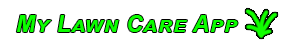
<style>
.page{position:relative;width:302px;height:45px;background:#ffffff}
.page>*{position:absolute;margin:0}
.t1{font:23.4px "Arial-BoldItalicMT";letter-spacing:0.02em;color:#0cff00;font-variant:small-caps}
</style>
<div class="page">
<p class="t1" style="left:16px;top:15px;width:222px;height:17px">My Lawn Care App</p>
</div>
